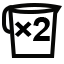
<style>
.page{position:relative;width:64px;height:64px;background:#ffffff}
.page>*{position:absolute;margin:0}
.t1{font:33.3px "Arial-BoldMT";letter-spacing:-0.04em;color:#000000;scale:1.05 1}
</style>
<div class="page">
<p class="t1" style="left:33px;top:17px;width:17px;height:24px">2</p>
<p class="t1" style="left:14px;top:21px;width:18px;height:16px">×</p>
</div>
